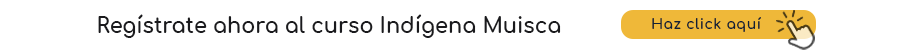
<style>
.page{position:relative;width:897px;height:52px;background:#ffffff}
.page>*{position:absolute;margin:0}
.t1{font:20.8px "Comfortaa-Bold";color:#1a1a1d}
</style>
<div class="page">
<p class="t1" style="left:98px;top:14px;width:463px;height:24px">Regístrate ahora al curso Indígena Muisca</p>
</div>
